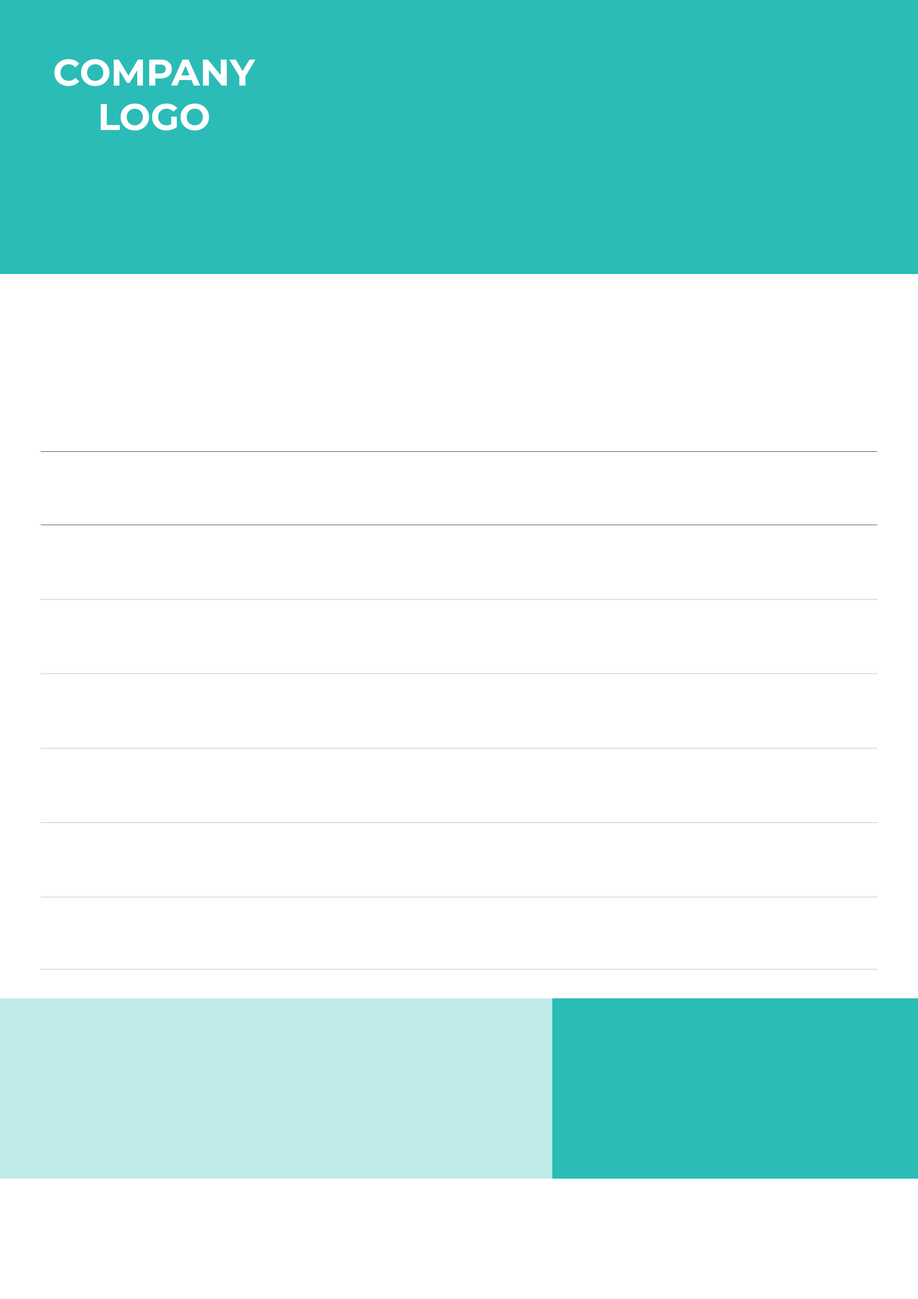
<style>
.page{position:relative;width:918px;height:1299px;background:#ffffff}
.page>*{position:absolute;margin:0}
.t1{font:37px "MontserratRoman-Bold";color:#ffffff}
</style>
<div class="page">
<p class="t1" style="left:54px;top:59px;width:201px;height:72px;text-align:center">COMPANY<br>LOGO</p>
</div>
